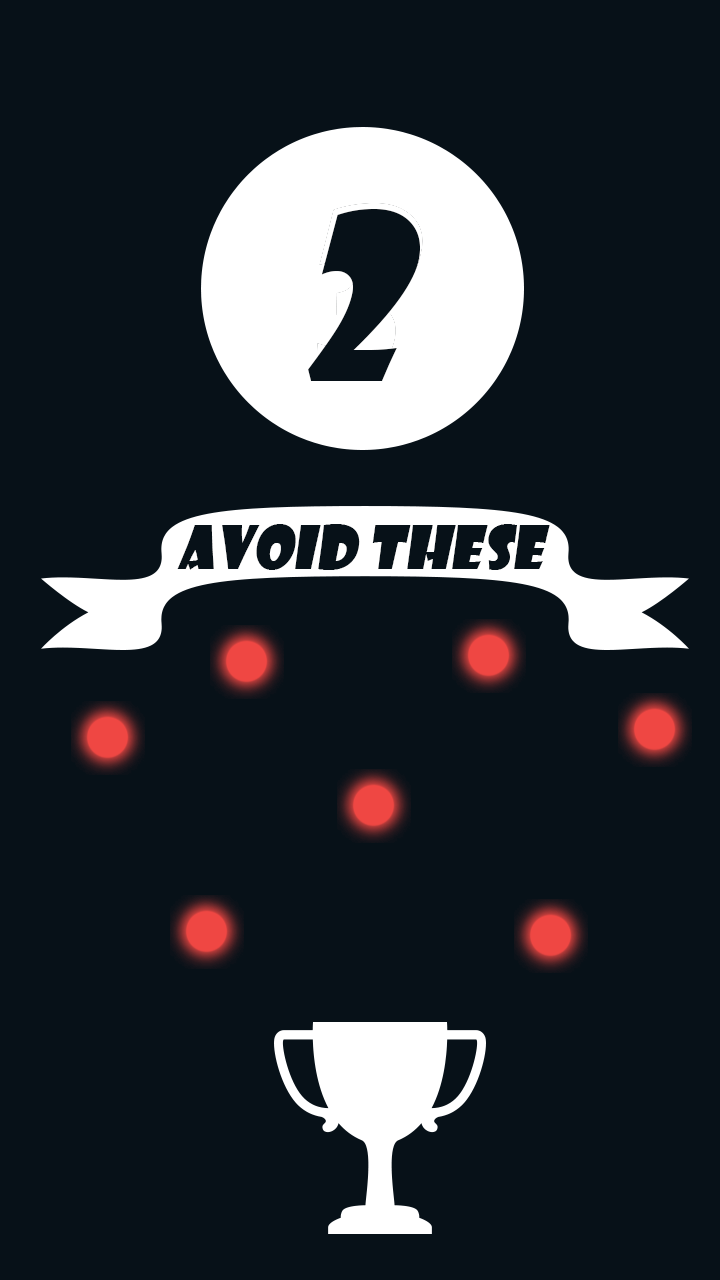
<style>
.page{position:relative;width:720px;height:1280px;background:#071118}
.page>*{position:absolute;margin:0}
.t1{font:225px "ShowcardGothic-Reg";color:#071118;font-style:italic}
.t2{font:58.3px "ShowcardGothic-Reg";color:#071118;font-style:italic}
</style>
<div class="page">
<p class="t1" style="left:308px;top:208px;width:113px;height:173px">2</p>
<p class="t2" style="left:177px;top:524px;width:373px;height:46px">Avoid these</p>
</div>
